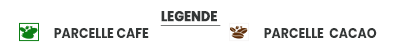
<style>
.page{position:relative;width:400px;height:50px;background:#ffffff}
.page>*{position:absolute;margin:0}
.t1{font:14.1px "Poppins-Bold";color:#343737;font-weight:bold;text-decoration:underline;scale:0.88 1}
.t2{font:14.1px "Poppins-Bold";color:#343737;scale:0.88 1}
</style>
<div class="page">
<p class="t1" style="left:160px;top:11px;width:61px;height:15px">LEGENDE</p>
<p class="t2" style="left:54px;top:28px;width:95px;height:10px">PARCELLE CAFE</p>
<p class="t2" style="left:264px;top:28px;width:113px;height:10px">PARCELLE  CACAO</p>
</div>
